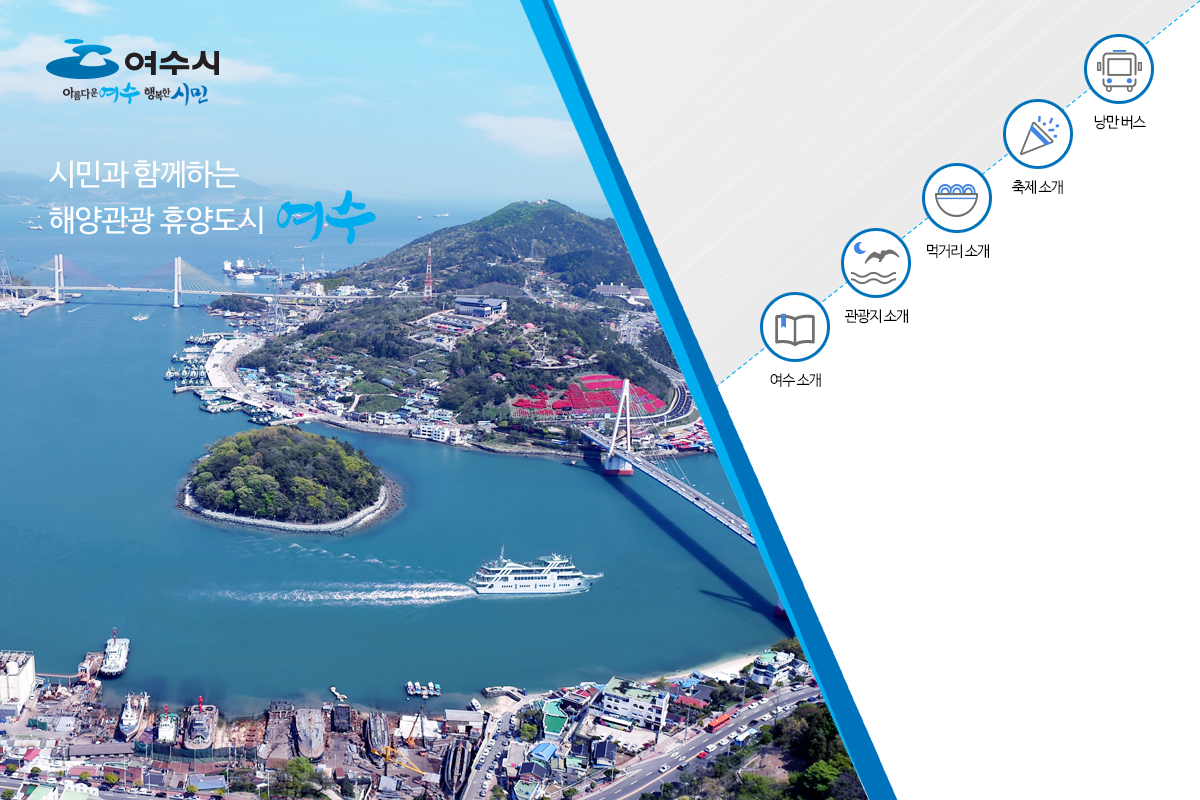
<style>
.page{position:relative;width:1200px;height:800px;background:#ffffff}
.page>*{position:absolute;margin:0}
.t1{font:15px "NanumBarunGothic";letter-spacing:-0.075em;color:#000000}
.t2{font:30px/45.6px "NanumBarunGothic";letter-spacing:-0.025em;color:#ffffff}
</style>
<div class="page">
<p class="t1" style="left:1094px;top:115px;width:52px;height:15px">낭만 버스</p>
<p class="t2" style="left:49px;top:160px;width:214px;height:75px">시민과 함께하는<br>해양관광 휴양도시</p>
<p class="t1" style="left:1012px;top:180px;width:51px;height:15px">축제 소개</p>
<p class="t1" style="left:927px;top:244px;width:62px;height:15px">먹거리 소개</p>
<p class="t1" style="left:845px;top:309px;width:63px;height:15px">관광지 소개</p>
<p class="t1" style="left:770px;top:373px;width:51px;height:14px">여수 소개</p>
</div>
